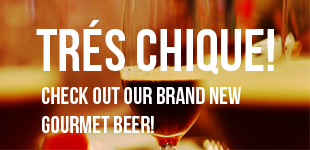
<style>
.page{position:relative;width:310px;height:150px}
.page>*{position:absolute;margin:0}
.t1{font:60px "BebasNeue";color:#ffffff;text-transform:uppercase}
.t2{font:24px "BebasNeue";color:#ffffff;text-transform:uppercase}
</style>
<div class="page">
<p class="t1" style="left:36px;top:20px;width:238px;height:54px">trés chique!</p>
<p class="t2" style="left:42px;top:87px;width:199px;height:46px">check out our brand new<br>gourmet beer!</p>
</div>
